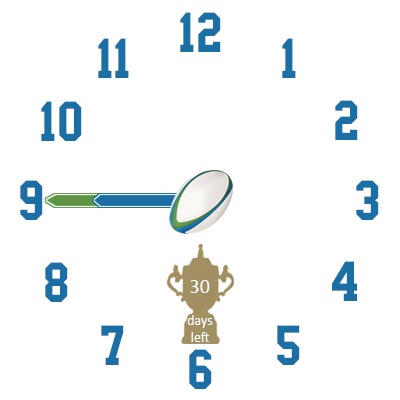
<style>
.page{position:relative;width:400px;height:400px;background:#ffffff}
.page>*{position:absolute;margin:0}
.t1{font:60px "SportsJersey";color:#1b6fa4}
.t2{font:20px "Calibri";color:#feffff}
.t3{font:14px "Calibri";color:#ffffff}
</style>
<div class="page">
<p class="t1" style="left:180px;top:12px;width:41px;height:40px">12</p>
<p class="t1" style="left:98px;top:38px;width:31px;height:40px">11</p>
<p class="t1" style="left:282px;top:38px;width:14px;height:40px">1</p>
<p class="t1" style="left:41px;top:101px;width:41px;height:40px">10</p>
<p class="t1" style="left:335px;top:100px;width:23px;height:40px">2</p>
<p class="t1" style="left:20px;top:180px;width:23px;height:40px">9</p>
<p class="t1" style="left:356px;top:180px;width:23px;height:40px">3</p>
<p class="t1" style="left:45px;top:262px;width:23px;height:40px">8</p>
<p class="t1" style="left:332px;top:261px;width:25px;height:40px">4</p>
<p class="t2" style="left:190px;top:280px;width:20px;height:13px">30</p>
<p class="t3" style="left:187px;top:315px;width:26px;height:27px;text-align:center">days<br>left</p>
<p class="t1" style="left:101px;top:325px;width:23px;height:40px">7</p>
<p class="t1" style="left:277px;top:325px;width:23px;height:40px">5</p>
<p class="t1" style="left:189px;top:349px;width:23px;height:40px">6</p>
</div>
